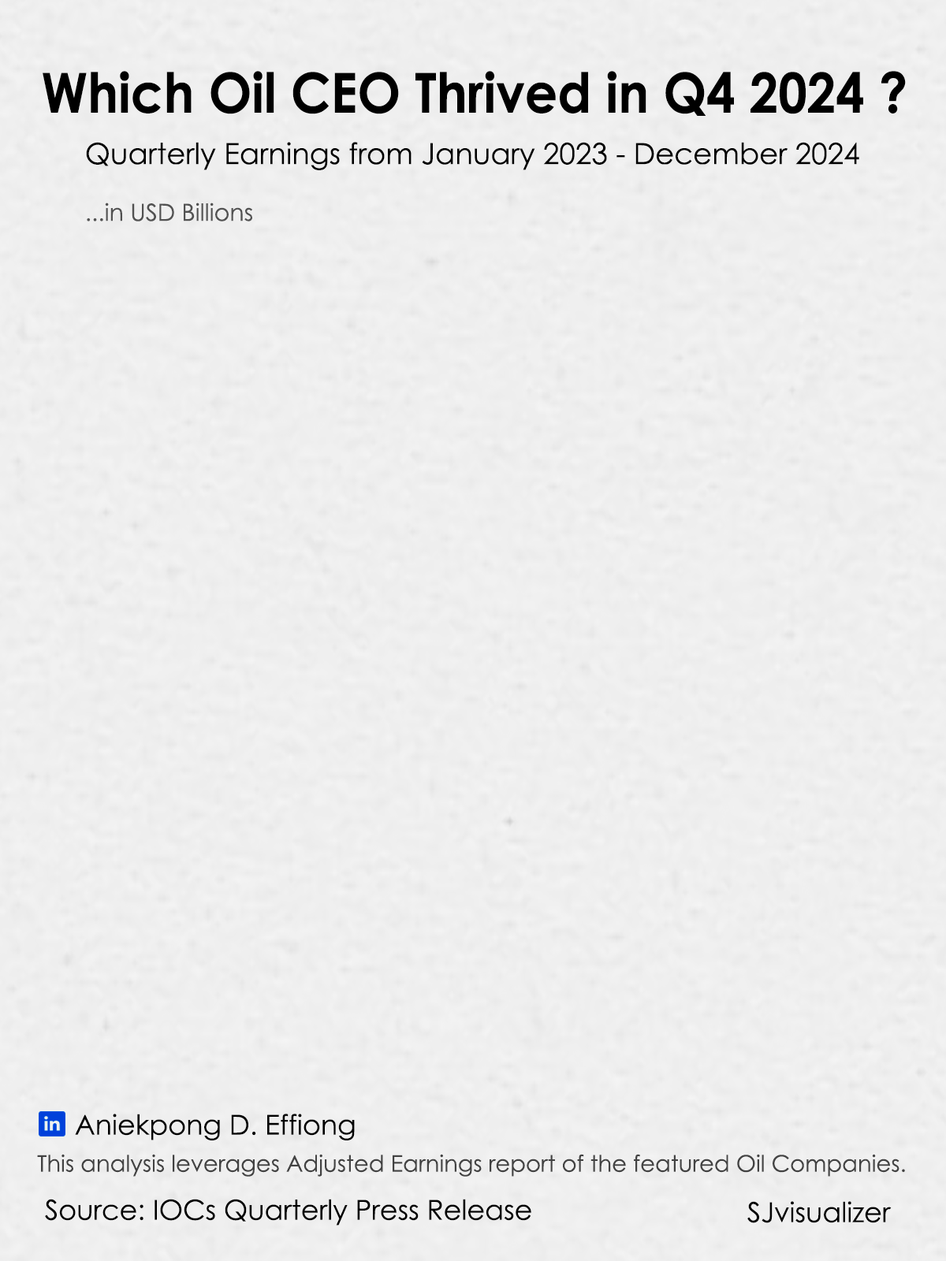
<style>
.page{position:relative;width:946px;height:1261px;background:#efefef}
.page>*{position:absolute;margin:0}
.t1{font:55.2px "CenturyGothic-Bold";color:#000000;scale:0.93 1}
.t2{font:29.2px "CenturyGothic";color:#000000}
.t3{font:23.6px "CenturyGothic";color:#525252}
.t4{font:27.6px "CenturyGothic";color:#000000}
.t5{font:22.9px "CenturyGothic";color:#424242}
</style>
<div class="page">
<p class="t1" style="left:43px;top:71px;width:862px;height:45px">Which Oil CEO Thrived in Q4 2024 ?</p>
<p class="t2" style="left:86px;top:142px;width:773px;height:28px">Quarterly Earnings from January 2023 - December 2024</p>
<p class="t3" style="left:87px;top:203px;width:165px;height:18px">...in USD Billions</p>
<p class="t4" style="left:75px;top:1114px;width:280px;height:26px">Aniekpong D. Effiong</p>
<p class="t5" style="left:37px;top:1154px;width:868px;height:23px">This analysis leverages Adjusted Earnings report of the featured Oil Companies.</p>
<p class="t4" style="left:45px;top:1199px;width:486px;height:26px">Source: IOCs Quarterly Press Release</p>
<p class="t4" style="left:747px;top:1201px;width:144px;height:22px">SJvisualizer</p>
</div>
